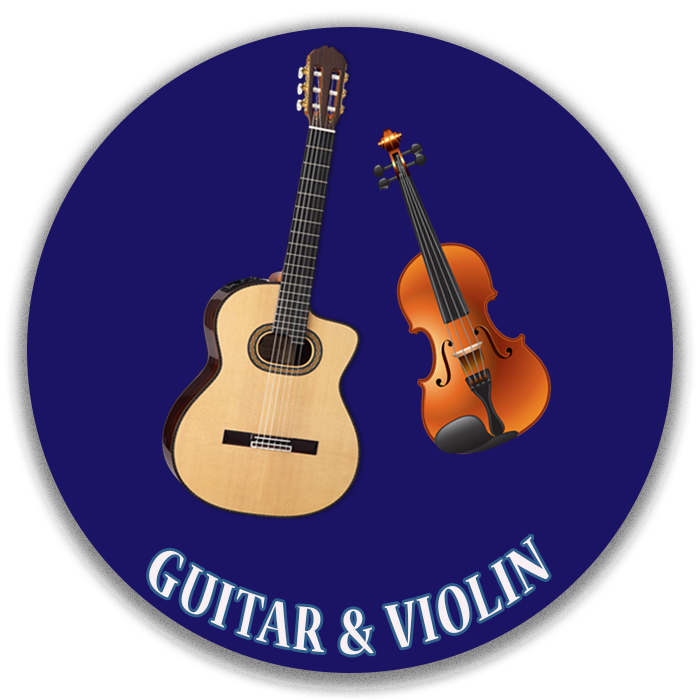
<style>
.page{position:relative;width:700px;height:700px;background:#1b1464}
.page>*{position:absolute;margin:0}
.t1{font:58.3px "NuevaStd-Bold";letter-spacing:0.05em;color:#f8f0f2;scale:0.83 1}
</style>
<div class="page">
<p class="t1" style="left:149px;top:536px;width:400px;height:119px;rotate:-1deg">GUITAR &amp; VIOLIN</p>
</div>
